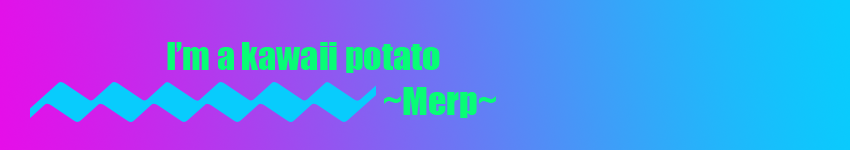
<style>
.page{position:relative;width:850px;height:150px}
.page>*{position:absolute;margin:0}
.t1{font:36px "Impact";color:#08fd75}
</style>
<div class="page">
<p class="t1" style="left:167px;top:42px;width:273px;height:31px">I’m a kawaii potato</p>
<p class="t1" style="left:384px;top:87px;width:112px;height:31px">~Merp~</p>
</div>
